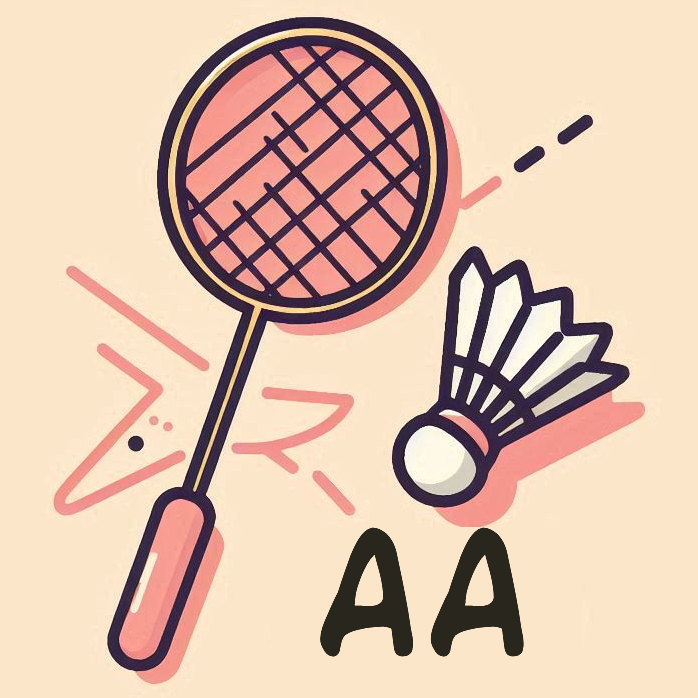
<style>
.page{position:relative;width:698px;height:698px;background:#fbe6c9}
.page>*{position:absolute;margin:0}
.t1{font:200px "ActionMan";color:#29261e}
</style>
<div class="page">
<p class="t1" style="left:320px;top:527px;width:204px;height:130px">AA</p>
</div>
